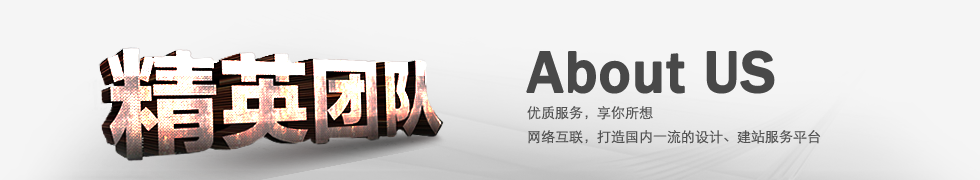
<style>
.page{position:relative;width:980px;height:180px;background:#f5f5f5}
.page>*{position:absolute;margin:0}
.t1{font:60px "FranklinGothic-Medium";color:#484848;font-weight:bold}
.t2{font:14px/24px "STXihei";color:#515151}
</style>
<div class="page">
<p class="t1" style="left:526px;top:50px;width:249px;height:44px">About US</p>
<p class="t2" style="left:527px;top:106px;width:294px;height:38px">优质服务，享你所想<br>网络互联，打造国内一流的设计、建站服务平台</p>
</div>
